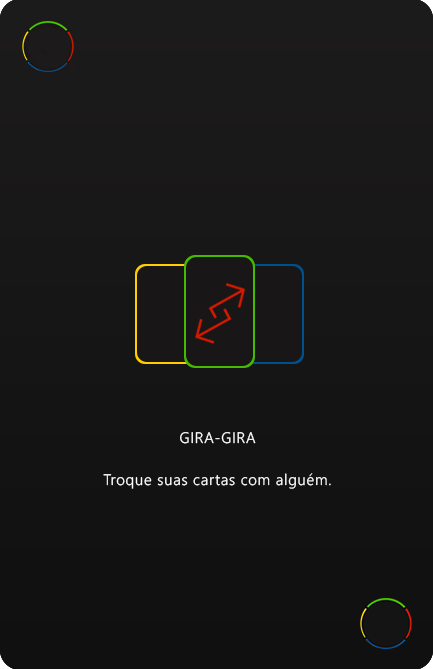
<style>
.page{position:relative;width:433px;height:669px}
.page>*{position:absolute;margin:0}
.t1{font:15.2px "NirmalaUI-Semilight";letter-spacing:0.05em;color:#ffffff}
</style>
<div class="page">
<p class="t1" style="left:180px;top:432px;width:76px;height:12px">GIRA-GIRA</p>
<p class="t1" style="left:103px;top:473px;width:228px;height:16px">Troque suas cartas com alguém.</p>
</div>
